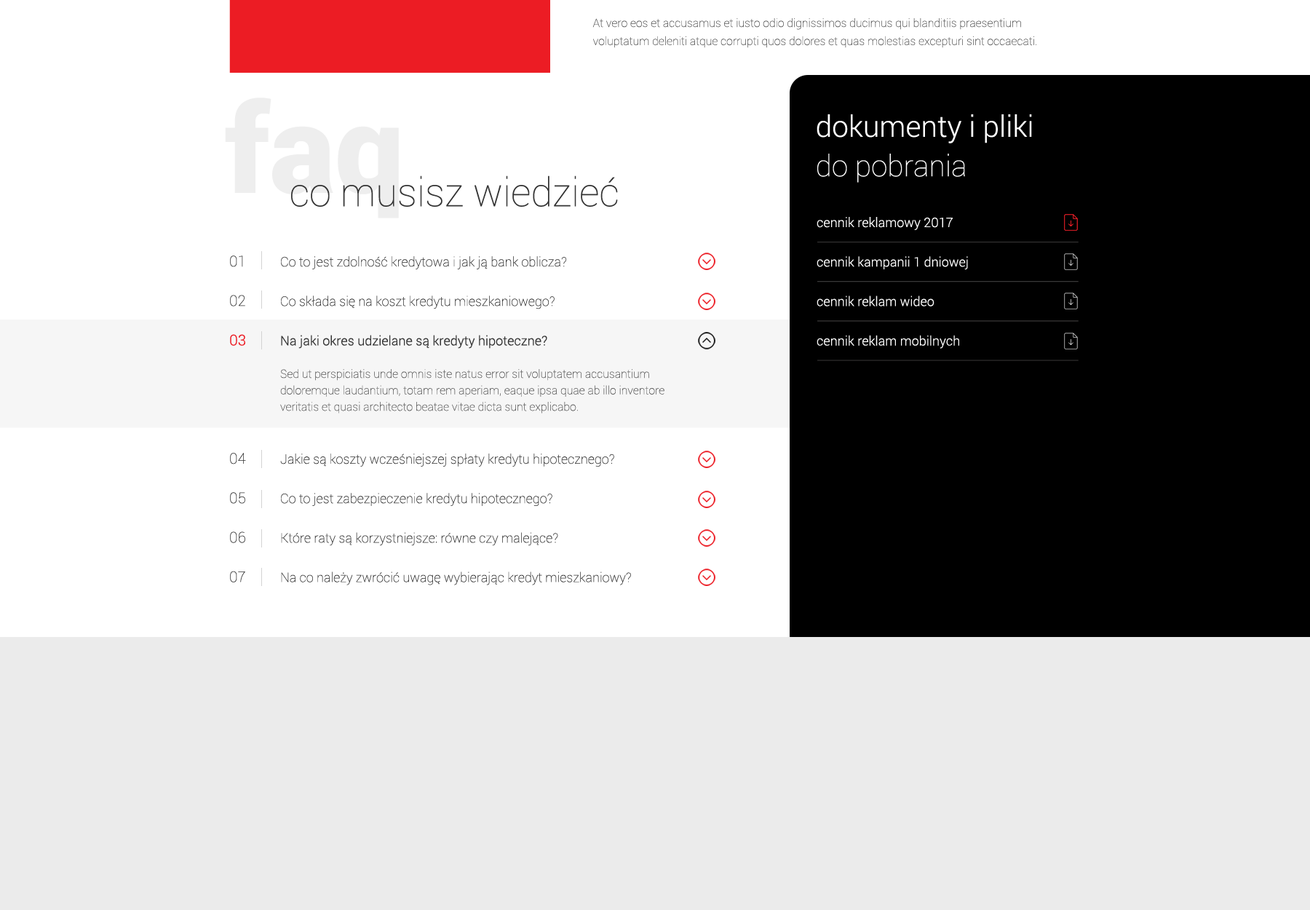
<style>
.page{position:relative;width:1310px;height:910px;background:#ffffff}
.page>*{position:absolute;margin:0}
.t1{font:11.5px/18.1px "Roboto-Thin";color:#595959}
.t2{font:123.3px "Roboto-Black";color:#eeeeee}
.t3{font:29.6px/39.4px "Roboto-Light";color:#ffffff}
.t4{font:29.6px/39.4px "Roboto-Thin";color:#ffffff}
.t5{font:39.4px "Roboto-Thin";color:#333333}
.t6{font:13.1px/39.4px "Roboto-Light";color:#ffffff}
.t7{font:14.8px/39.4px "Roboto-Thin";color:#333333}
.t8{font:14.8px/39.4px "Roboto-Light";color:#ec1c24}
.t9{font:13.1px/39.4px "Roboto-Thin";color:#333333}
.t10{font:13.1px/39.4px "Roboto-Light";color:#333333}
.t11{font:11.5px/16.4px "Roboto-Thin";color:#595959}
</style>
<div class="page">
<p class="t1" style="left:593px;top:18px;width:444px;height:30px">At vero eos et accusamus et iusto odio dignissimos ducimus qui blanditiis praesentium voluptatum deleniti atque corrupti quos dolores et quas molestias excepturi sint occaecati.</p>
<p class="t2" style="left:225px;top:98px;width:174px;height:120px">faq</p>
<p class="t3" style="left:817px;top:114px;width:215px;height:69px">dokumenty i pliki<br><span class="t4">do pobrania</span></p>
<p class="t5" style="left:291px;top:175px;width:327px;height:32px">co musisz wiedzieć</p>
<p class="t6" style="left:817px;top:217px;width:151px;height:132px">cennik reklamowy 2017<br>cennik kampanii 1 dniowej<br>cennik reklam wideo<br>cennik reklam mobilnych</p>
<p class="t7" style="left:230px;top:256px;width:16px;height:326px">01<br>02<br><span class="t8">03<br></span><br><br>04<br>05<br>06<br>07</p>
<p class="t9" style="left:280px;top:256px;width:351px;height:329px">Co to jest zdolność kredytowa i jak ją bank oblicza?<br>Co składa się na koszt kredytu mieszkaniowego?<br><span class="t10">Na jaki okres udzielane są kredyty hipoteczne?<br></span><br><br>Jakie są koszty wcześniejszej spłaty kredytu hipotecznego?<br>Co to jest zabezpieczenie kredytu hipotecznego?<br>Które raty są korzystniejsze: równe czy malejące?<br>Na co należy zwrócić uwagę wybierając kredyt mieszkaniowy?</p>
<p class="t11" style="left:280px;top:369px;width:385px;height:44px">Sed ut perspiciatis unde omnis iste natus error sit voluptatem accusantium doloremque laudantium, totam rem aperiam, eaque ipsa quae ab illo inventore veritatis et quasi architecto beatae vitae dicta sunt explicabo.</p>
</div>
